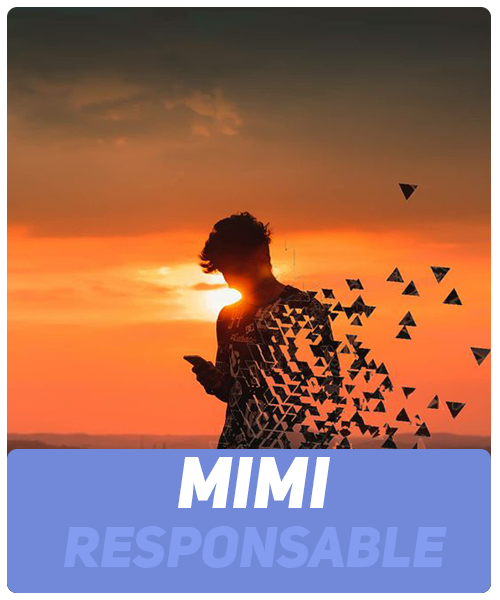
<style>
.page{position:relative;width:500px;height:600px}
.page>*{position:absolute;margin:0}
.t1{font:72px "UniSansHeavyItalicCAPS";color:#ffffff}
.t2{font:57px "UniSansHeavyItalicCAPS";color:#849cef}
</style>
<div class="page">
<p class="t1" style="left:178px;top:457px;width:152px;height:51px">Mimi</p>
<p class="t2" style="left:64px;top:526px;width:383px;height:42px">Responsable</p>
</div>
